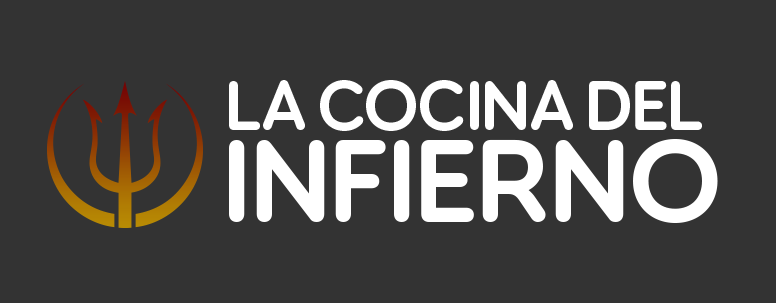
<style>
.page{position:relative;width:776px;height:303px;background:#333333}
.page>*{position:absolute;margin:0}
.t1{font:75.2px/91.7px "TorusPro-SemiBold";letter-spacing:-0.025em;color:#ffffff}
.t2{font:126.3px/91.7px "TorusPro-SemiBold";letter-spacing:-0.025em;color:#ffffff}
</style>
<div class="page">
<p class="t1" style="left:229px;top:80px;width:489px;height:143px;text-align:center">LA COCINA DEL <br><span class="t2">INFIERNO</span></p>
</div>
